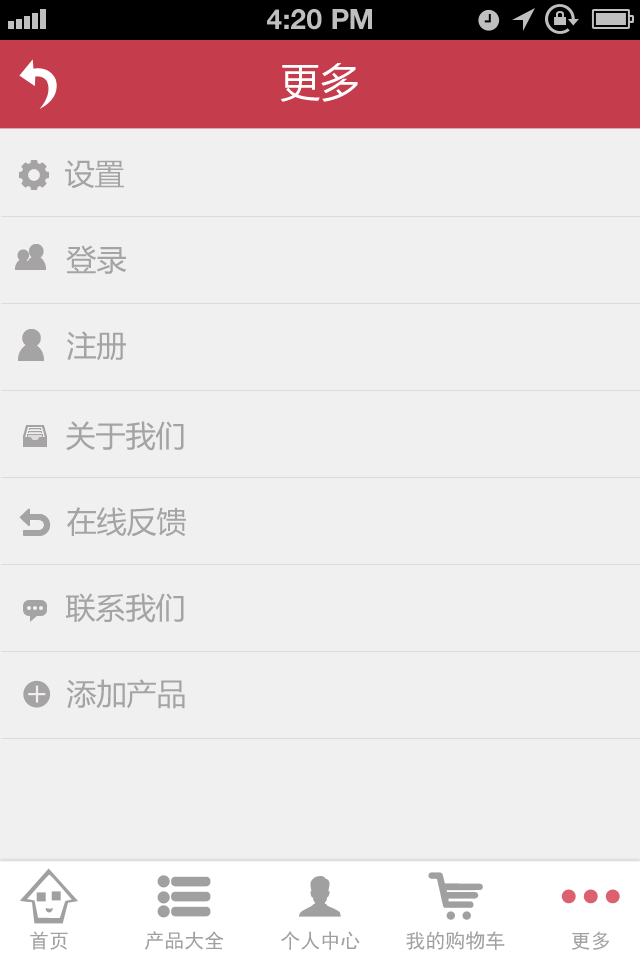
<style>
.page{position:relative;width:640px;height:960px;background:#f0f0f0}
.page>*{position:absolute;margin:0}
.t1{font:28px "HelveticaNeue-Bold";color:#bfbfbf;text-transform:uppercase}
.t2{font:40px "MicrosoftYaHei";color:#ffffff;text-transform:uppercase}
.t3{font:30px "MicrosoftYaHei";color:#a5a3a3;text-transform:uppercase}
.t4{font:20px "SimHei";color:#a0a0a0}
</style>
<div class="page">
<p class="t1" style="left:267px;top:9px;width:105px;height:21px">4:20 PM</p>
<p class="t2" style="left:280px;top:63px;width:78px;height:39px">更多</p>
<p class="t3" style="left:65px;top:160px;width:59px;height:29px">设置</p>
<p class="t3" style="left:66px;top:245px;width:61px;height:29px">登录</p>
<p class="t3" style="left:67px;top:331px;width:59px;height:30px">注册</p>
<p class="t3" style="left:66px;top:421px;width:118px;height:30px">关于我们</p>
<p class="t3" style="left:67px;top:507px;width:119px;height:30px">在线反馈</p>
<p class="t3" style="left:65px;top:593px;width:119px;height:30px">联系我们</p>
<p class="t3" style="left:66px;top:679px;width:119px;height:30px">添加产品</p>
<p class="t4" style="left:30px;top:931px;width:38px;height:19px">首页</p>
<p class="t4" style="left:145px;top:931px;width:79px;height:19px">产品大全</p>
<p class="t4" style="left:281px;top:931px;width:79px;height:19px">个人中心</p>
<p class="t4" style="left:406px;top:931px;width:99px;height:19px">我的购物车</p>
<p class="t4" style="left:572px;top:931px;width:38px;height:19px">更多</p>
</div>
